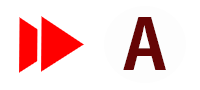
<style>
.page{position:relative;width:200px;height:90px;background:#ffffff}
.page>*{position:absolute;margin:0}
.t1{font:69px "KozGoPr6N-Bold";color:#650505}
</style>
<div class="page">
<p class="t1" style="left:123px;top:17px;width:43px;height:53px">A</p>
</div>
